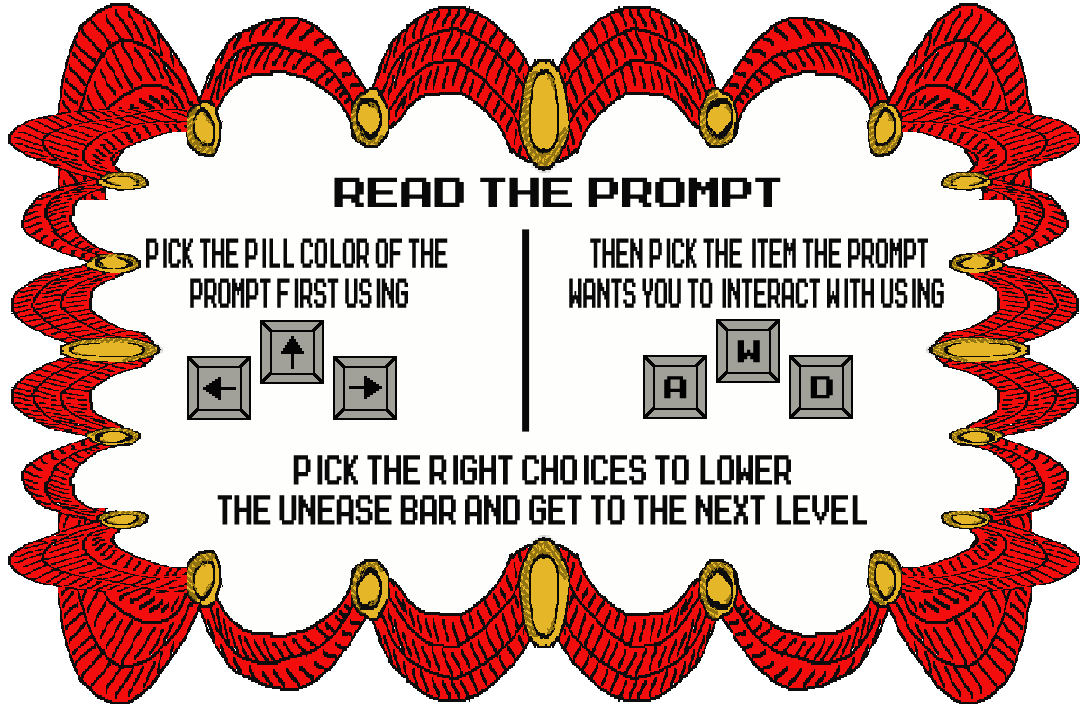
<style>
.page{position:relative;width:1080px;height:704px;background:#fefefd}
.page>*{position:absolute;margin:0}
.t1{font:33.3px "MegaMan-2";color:#090909}
.t2{font:33.3px "MegaMan-2";color:#090909;scale:0.42 1}
.t3{font:33.3px "MegaMan-2";color:#090909;scale:0.57 1}
</style>
<div class="page">
<p class="t1" style="left:334px;top:177px;width:447px;height:30px">Read the prompt</p>
<p class="t2" style="left:146px;top:238px;width:302px;height:70px;text-align:center">pick the pill color of the <br>prompt first using</p>
<p class="t2" style="left:569px;top:238px;width:375px;height:70px;text-align:center">then pick the item the prompt<br>wants you to interact with using</p>
<p class="t3" style="left:217px;top:455px;width:650px;height:70px;text-align:center">Pick the right choices to lower<br>the unease bar and get to the next level</p>
</div>
